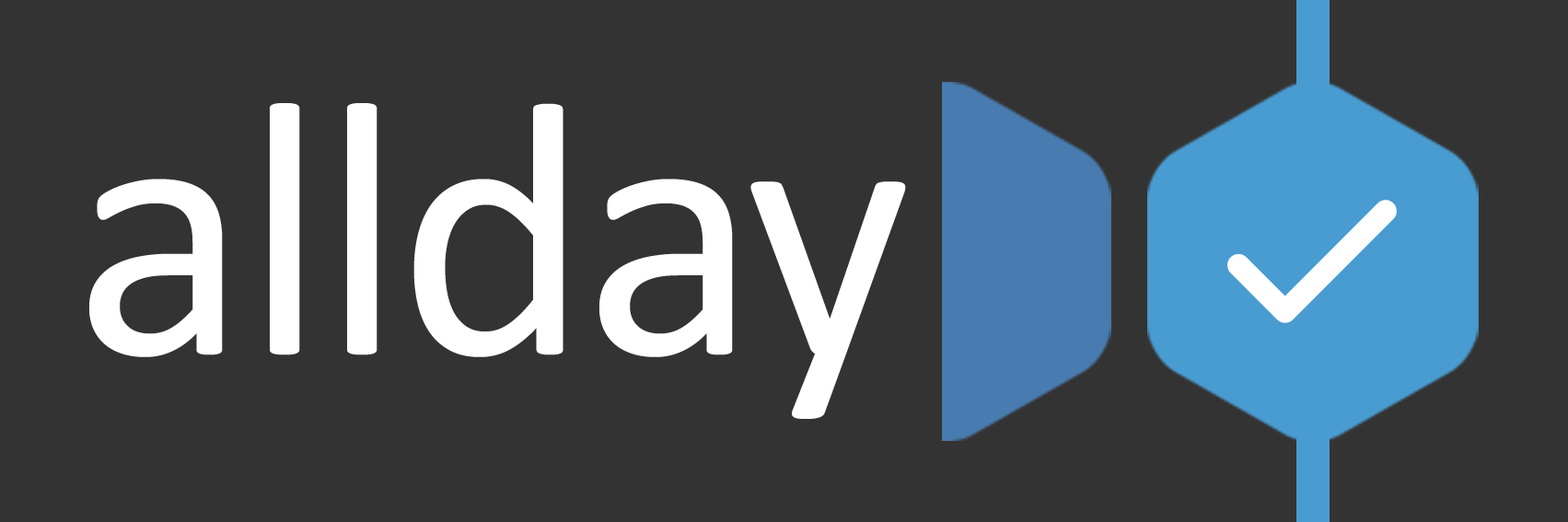
<style>
.page{position:relative;width:1568px;height:522px;background:#333333}
.page>*{position:absolute;margin:0}
.t1{font:368.3px "Calibri";letter-spacing:-0.02em;color:#ffffff}
</style>
<div class="page">
<p class="t1" style="left:88px;top:103px;width:818px;height:316px">allday</p>
</div>
